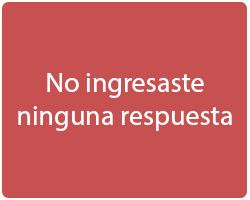
<style>
.page{position:relative;width:250px;height:200px;background:#c65150}
.page>*{position:absolute;margin:0}
.t1{font:28px "MyriadHebrew-Regular";color:#ffffff}
</style>
<div class="page">
<p class="t1" style="left:18px;top:73px;width:214px;height:58px;text-align:center">No ingresaste<br>ninguna respuesta</p>
</div>
